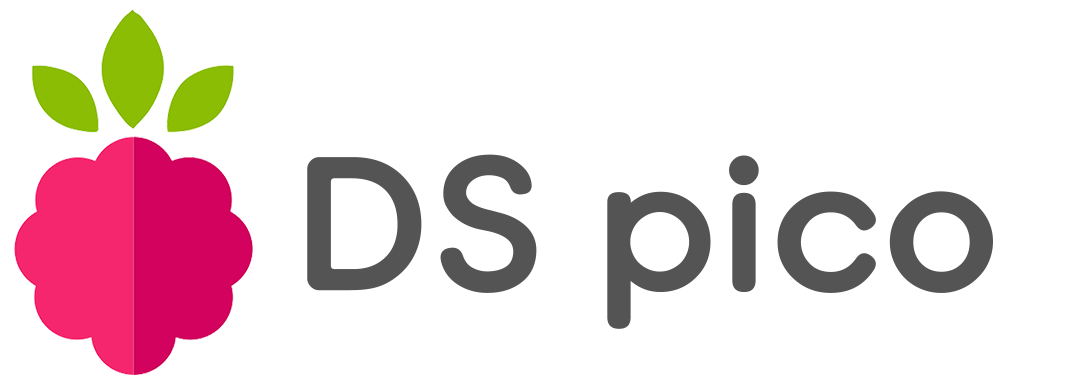
<style>
.page{position:relative;width:1080px;height:383px;background:#ffffff}
.page>*{position:absolute;margin:0}
.t1{font:180.3px "TypoDodamM";letter-spacing:0.01em;color:#545454}
</style>
<div class="page">
<p class="t1" style="left:307px;top:154px;width:686px;height:175px">DS pico</p>
</div>
